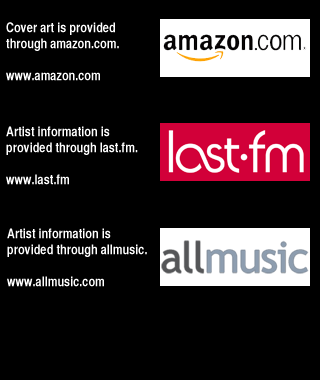
<style>
.page{position:relative;width:320px;height:380px;background:#000000}
.page>*{position:absolute;margin:0}
.t1{font:13.3px "HelveticaCYBold";color:#ffffff}
</style>
<div class="page">
<p class="t1" style="left:6px;top:22px;width:113px;height:59px">Cover art is provided<br>through amazon.com.<br><br>www.amazon.com</p>
<p class="t1" style="left:6px;top:126px;width:132px;height:59px">Artist information is<br>provided through last.fm.<br><br>www.last.fm</p>
<p class="t1" style="left:7px;top:228px;width:140px;height:59px">Artist information is<br>provided through allmusic.<br><br>www.allmusic.com</p>
</div>
